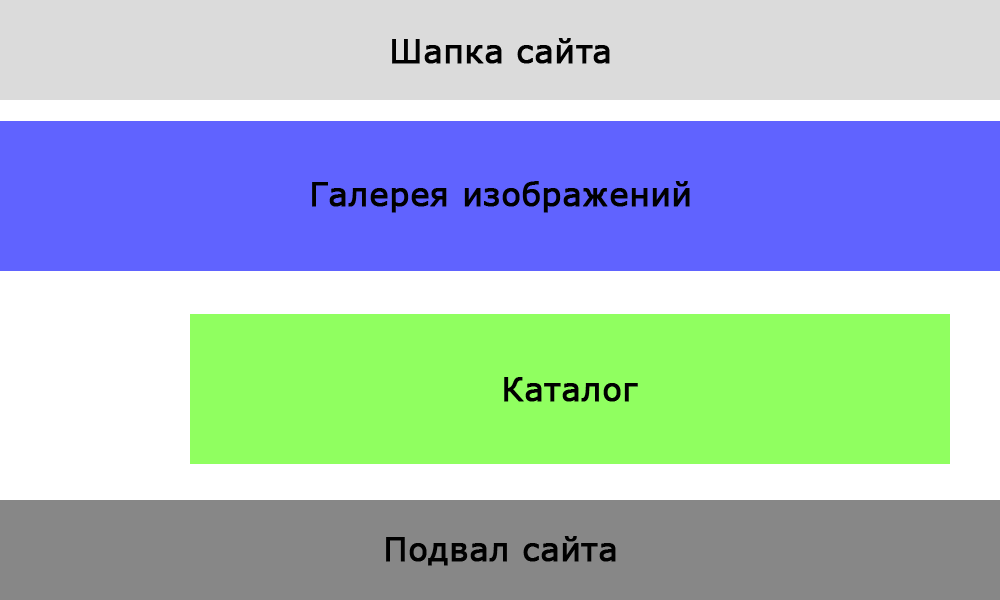
<style>
.page{position:relative;width:1000px;height:600px;background:#6063ff}
.page>*{position:absolute;margin:0}
.t1{font:32px "Verdana";color:#000000;font-weight:bold}
</style>
<div class="page">
<p class="t1" style="left:392px;top:38px;width:218px;height:26px">Шапка сайта</p>
<p class="t1" style="left:312px;top:181px;width:378px;height:32px">Галерея изображений</p>
<p class="t1" style="left:504px;top:377px;width:134px;height:25px">Каталог</p>
<p class="t1" style="left:386px;top:536px;width:230px;height:30px">Подвал сайта</p>
</div>
